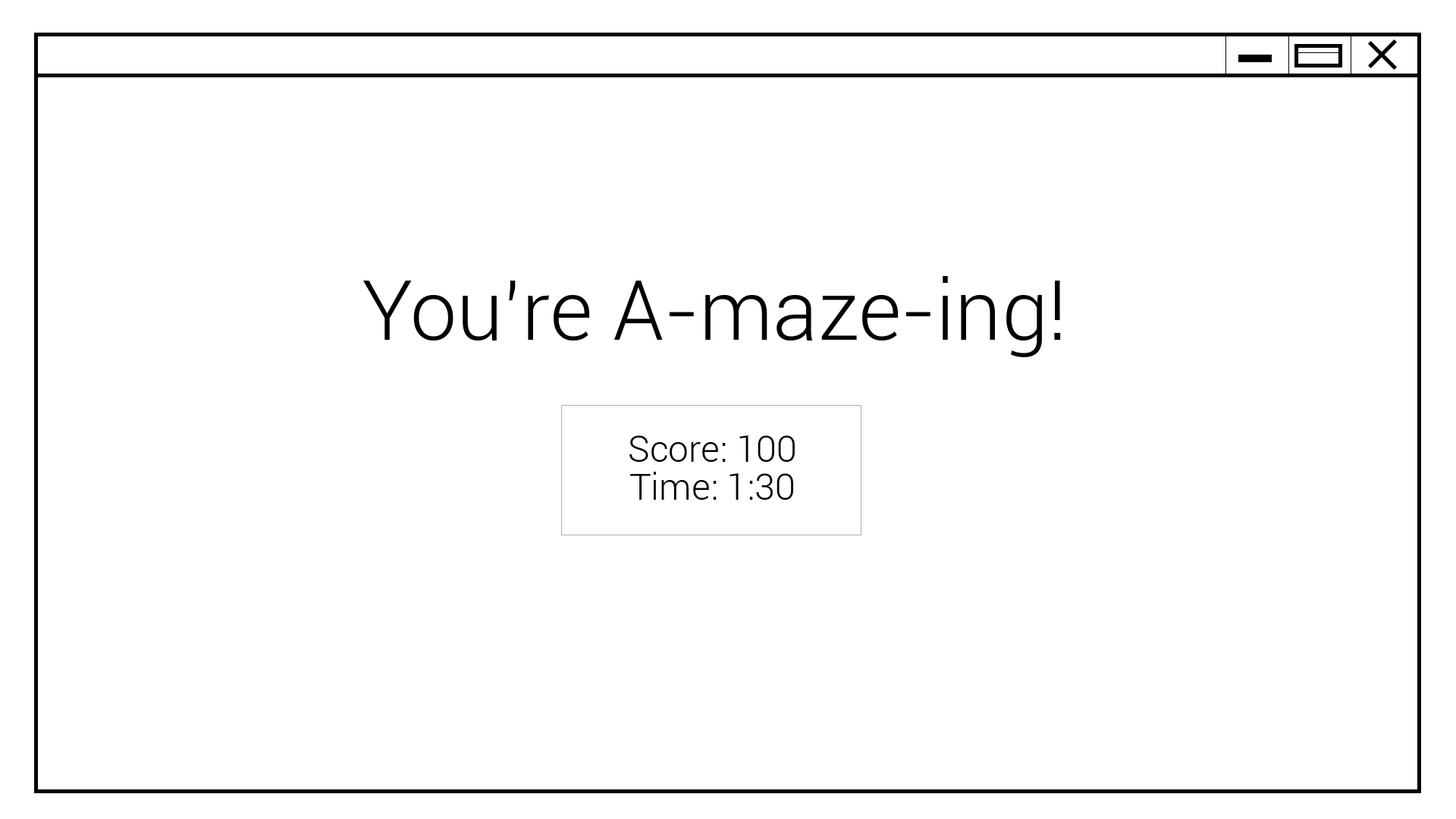
<style>
.page{position:relative;width:1456px;height:819px;background:#ffffff}
.page>*{position:absolute;margin:0}
.t1{font:83.4px "Roboto-Light";color:#000000}
.t2{font:36.4px/37.9px "Roboto-Light";color:#000000}
</style>
<div class="page">
<p class="t1" style="left:363px;top:276px;width:698px;height:81px">You’re A-maze-ing!</p>
<p class="t2" style="left:629px;top:435px;width:166px;height:65px;text-align:center">Score: 100<br>Time: 1:30</p>
</div>
